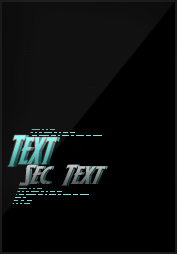
<style>
.page{position:relative;width:177px;height:254px;background:#000000}
.page>*{position:absolute;margin:0}
.t1{font:28px "Wolf'sBaneItalic"}
.t2{font:18.5px "Wolf'sBaneItalic";scale:1.36 1}
</style>
<div class="page">
<p class="t1" style="left:7px;top:135px;width:50px;height:32px">Text</p>
<p class="t2" style="left:19px;top:164px;width:87px;height:22px">Sec. Text</p>
<p class="t2" style="left:21px;top:164px;width:87px;height:22px">Sec. Text</p>
</div>
